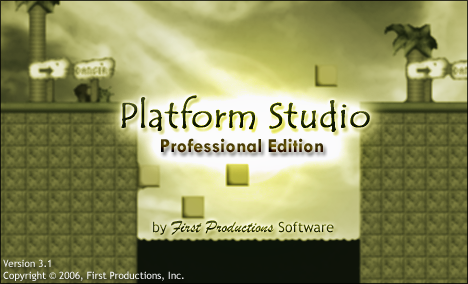
<style>
.page{position:relative;width:468px;height:284px}
.page>*{position:absolute;margin:0}
.t1{font:35.9px "TempusSansITC";color:#192208;font-weight:bold}
.t2{font:19.9px "TwCenMT-Bold"}
.t3{font:17.9px "BrushScriptMT"}
.t4{font:13.9px "TrebuchetMS"}
.t5{font:10px "TrebuchetMS";color:#e7edf8}
</style>
<div class="page">
<p class="t1" style="left:121px;top:95px;width:249px;height:37px">Platform Studio</p>
<p class="t2" style="left:161px;top:138px;width:162px;height:15px">Professional Edition</p>
<p class="t3" style="left:153px;top:220px;width:181px;height:15px"><span class="t4">by </span>First Productions <span class="t4">Software</span></p>
<p class="t5" style="left:3px;top:259px;width:181px;height:22px">Version 3.1<br>Copyright © 2006, First Productions, Inc.</p>
</div>
